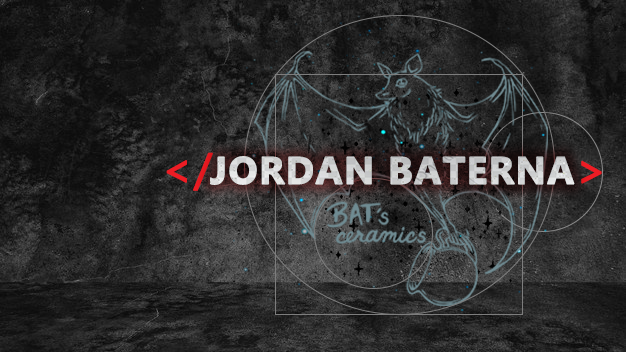
<style>
.page{position:relative;width:626px;height:352px}
.page>*{position:absolute;margin:0}
.t1{font:45px "MicrosoftPhagsPa";letter-spacing:0.02em;color:#ed1c24;font-weight:bold}
.t2{font:38px "MicrosoftPhagsPa-Bold";letter-spacing:0.02em;color:#cfd1d1;font-weight:bold}
</style>
<div class="page">
<p class="t1" style="left:166px;top:152px;width:47px;height:39px">&lt;/</p>
<p class="t2" style="left:210px;top:156px;width:365px;height:29px">JORDAN BATERNA</p>
<p class="t1" style="left:581px;top:160px;width:21px;height:24px">&gt;</p>
</div>
